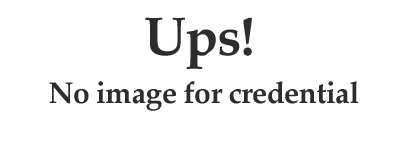
<style>
.page{position:relative;width:400px;height:150px;background:#ffffff}
.page>*{position:absolute;margin:0}
.t1{font:54.3px "Palatino-Bold";letter-spacing:-0.02em;color:#2e2d2d}
.t2{font:30px "Palatino-Bold";letter-spacing:-0.02em;color:#2e2d2d}
</style>
<div class="page">
<p class="t1" style="left:145px;top:17px;width:107px;height:52px">Ups!</p>
<p class="t2" style="left:49px;top:81px;width:310px;height:30px">No image for credential</p>
</div>
